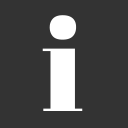
<style>
.page{position:relative;width:128px;height:128px;background:#333333}
.page>*{position:absolute;margin:0}
.t1{font:131.2px "AbrilFatface-Regular";letter-spacing:0.02em;color:#ffffff}
</style>
<div class="page">
<p class="t1" style="left:42px;top:15px;width:41px;height:96px">i</p>
</div>
